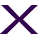
<style>
.page{position:relative;width:40px;height:40px;background:#ffffff}
.page>*{position:absolute;margin:0}
.t1{font:41.1px "SegoeUI";color:#33074e;scale:1.66 1}
</style>
<div class="page">
<p class="t1" style="left:0px;top:5px;width:38px;height:29px">X</p>
</div>
